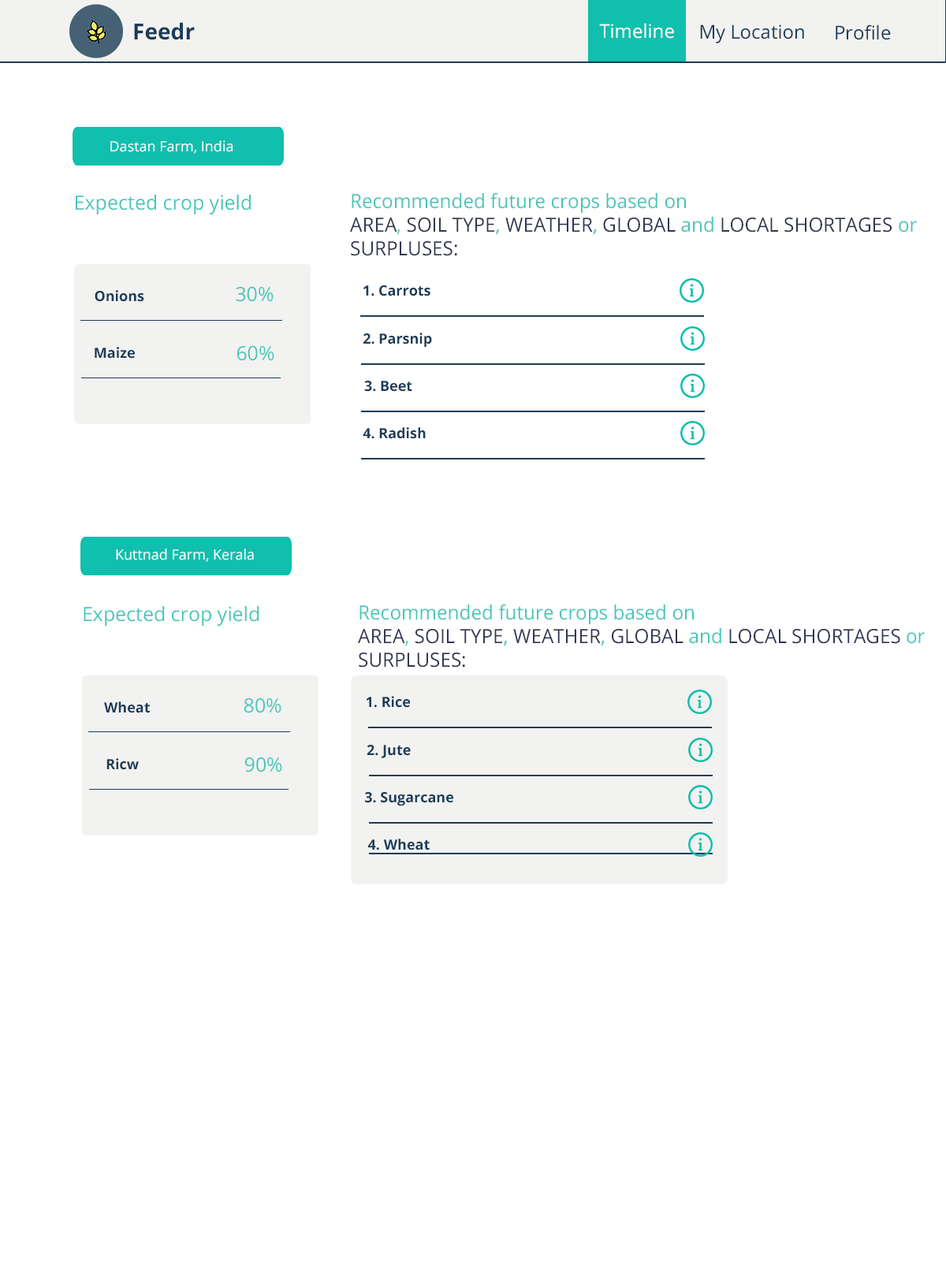
<style>
.page{position:relative;width:946px;height:1261px;background:#ffffff}
.page>*{position:absolute;margin:0}
.t1{font:22.1px "OpenSans-Bold";color:#1b3c59}
.t2{font:18.9px "OpenSans";color:#fdfffb}
.t3{font:18.9px "OpenSans";color:#1b3c59}
.t4{font:14.2px "OpenSans";color:#ffffff}
.t5{font:19.7px "OpenSans";color:#46c6b8}
.t6{font:19.6px "OpenSans";color:#46c6b8}
.t7{font:19.6px "OpenSans";color:#323650}
.t8{font:19.6px "OpenSans";color:#69cec2}
.t9{font:14.2px "OpenSans-Bold";color:#1b3c59}
</style>
<div class="page">
<p class="t1" style="left:134px;top:22px;width:61px;height:18px">Feedr</p>
<p class="t2" style="left:599px;top:23px;width:75px;height:16px">Timeline</p>
<p class="t3" style="left:700px;top:24px;width:104px;height:19px">My Location</p>
<p class="t3" style="left:835px;top:24px;width:56px;height:16px">Profile</p>
<p class="t4" style="left:110px;top:140px;width:122px;height:14px">Dastan Farm, India</p>
<p class="t5" style="left:76px;top:195px;width:175px;height:19px">Expected crop yield</p>
<p class="t6" style="left:350px;top:192px;width:567px;height:64px">Recommended future crops based on <br><span class="t7">AREA</span><span class="t8">,</span><span class="t7"> SOIL TYPE</span>, <span class="t7">WEATHER</span>, <span class="t7">GLOBAL</span> and <span class="t7">LOCAL SHORTAGES </span>or <br><span class="t7">SURPLUSES:</span></p>
<p class="t9" style="left:95px;top:290px;width:49px;height:12px">Onions</p>
<p class="t5" style="left:236px;top:286px;width:37px;height:16px">30%</p>
<p class="t9" style="left:363px;top:285px;width:67px;height:11px">1. Carrots</p>
<p class="t9" style="left:363px;top:333px;width:69px;height:15px">2. Parsnip</p>
<p class="t9" style="left:95px;top:347px;width:40px;height:12px">Maize</p>
<p class="t5" style="left:237px;top:345px;width:37px;height:16px">60%</p>
<p class="t9" style="left:364px;top:381px;width:48px;height:11px">3. Beet</p>
<p class="t9" style="left:363px;top:427px;width:63px;height:12px">4. Radish</p>
<p class="t4" style="left:116px;top:548px;width:138px;height:14px">Kuttnad Farm, Kerala</p>
<p class="t6" style="left:358px;top:604px;width:566px;height:63px">Recommended future crops based on <br><span class="t7">AREA</span><span class="t8">,</span><span class="t7"> SOIL TYPE</span>, <span class="t7">WEATHER</span>, <span class="t7">GLOBAL</span> and <span class="t7">LOCAL SHORTAGES </span>or <br><span class="t7">SURPLUSES:</span></p>
<p class="t5" style="left:84px;top:606px;width:175px;height:20px">Expected crop yield</p>
<p class="t9" style="left:104px;top:701px;width:46px;height:12px">Wheat</p>
<p class="t5" style="left:244px;top:697px;width:37px;height:16px">80%</p>
<p class="t9" style="left:366px;top:696px;width:44px;height:12px">1. Rice</p>
<p class="t9" style="left:366px;top:745px;width:45px;height:13px">2. Jute</p>
<p class="t9" style="left:106px;top:758px;width:33px;height:12px">Ricw</p>
<p class="t5" style="left:244px;top:757px;width:38px;height:15px">90%</p>
<p class="t9" style="left:365px;top:792px;width:88px;height:14px">3. Sugarcane</p>
<p class="t9" style="left:367px;top:839px;width:62px;height:11px">4. Wheat</p>
</div>
